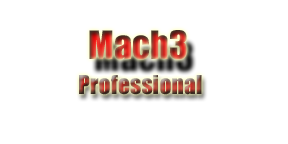
<style>
.page{position:relative;width:288px;height:144px;background:#ffffff}
.page>*{position:absolute;margin:0}
.t1{font:36px "Impact"}
.t2{font:24px "Impact"}
</style>
<div class="page">
<p class="t1" style="left:89px;top:30px;width:98px;height:30px">Mach3</p>
<p class="t2" style="left:79px;top:75px;width:123px;height:20px">Professional</p>
</div>
